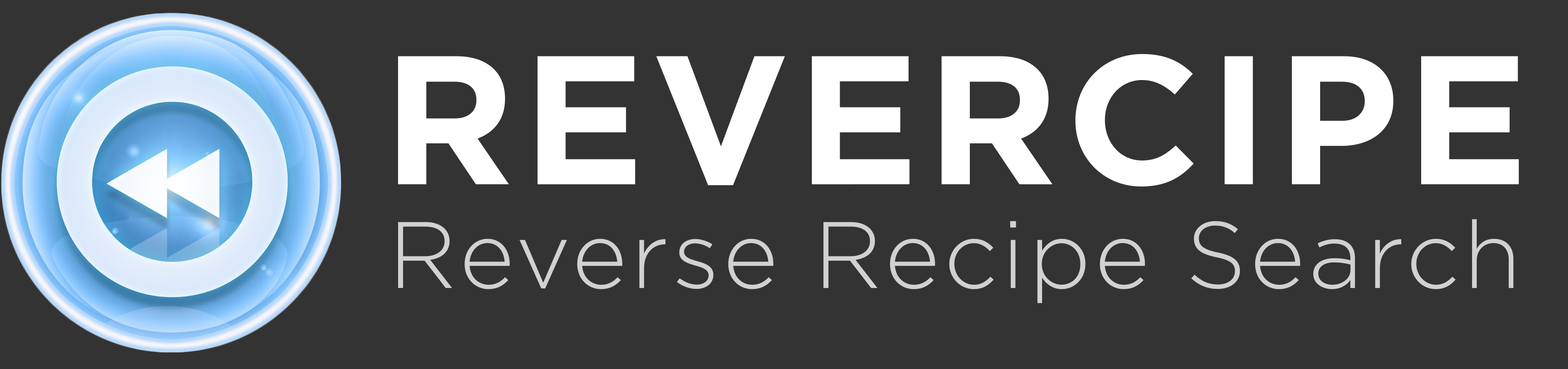
<style>
.page{position:relative;width:1568px;height:369px;background:#333333}
.page>*{position:absolute;margin:0}
.t1{font:183px "Gotham-Bold";letter-spacing:0.039em;color:#ffffff;text-transform:uppercase}
.t2{font:94.2px "Gotham-Light";letter-spacing:0.039em;color:#d1d1d1}
</style>
<div class="page">
<p class="t1" style="left:398px;top:54px;width:1121px;height:133px">Revercipe</p>
<p class="t2" style="left:398px;top:219px;width:1116px;height:84px">Reverse Recipe Search</p>
</div>
